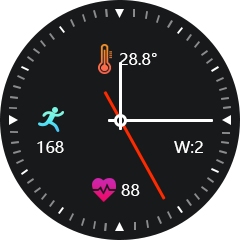
<style>
.page{position:relative;width:240px;height:240px;background:#17191a}
.page>*{position:absolute;margin:0}
.t1{font:16px "MicrosoftYaHei";color:#ffffff;font-variant:small-caps}
</style>
<div class="page">
<p class="t1" style="left:119px;top:53px;width:38px;height:12px">28.8°</p>
<p class="t1" style="left:37px;top:141px;width:27px;height:12px">168</p>
<p class="t1" style="left:174px;top:141px;width:29px;height:12px">W:2</p>
<p class="t1" style="left:121px;top:184px;width:19px;height:12px">88</p>
</div>
